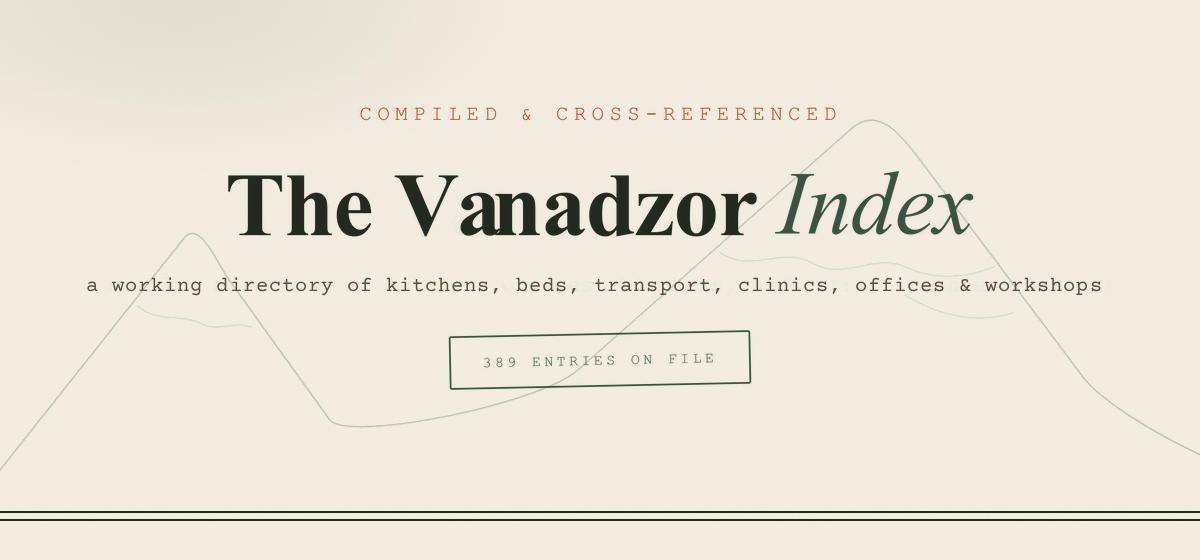
<style>
.page{position:relative;width:1200px;height:560px;background:#f2ede0}
.page>*{position:absolute;margin:0}
.t1{font:20.5px "CourierNewPSMT";letter-spacing:0.272em;color:#a94822}
.t2{font:20.5px "CourierNewPSMT";letter-spacing:0.272em;color:#a8451f}
.t3{font:90.2px "TimesNewRomanPS-BoldMT";letter-spacing:-0.011em;color:#23291f}
.t4{font:89.9px "TimesNewRomanPS-ItalicMT";letter-spacing:-0.008em;color:#3c5240}
.t5{font:20.5px "CourierNewPSMT";letter-spacing:0.036em;color:#57513f}
.t6{font:14.8px "CourierNewPSMT";letter-spacing:0.238em;color:#435846}
.t7{font:14.8px "CourierNewPSMT";letter-spacing:0.238em;color:#3c5240}
</style>
<div class="page">
<p class="t1" style="left:358px;top:105px;width:480px;height:18px">COMPILED &amp; CROSS-REFERENCED</p>
<p class="t2" style="left:358px;top:105px;width:480px;height:18px">COMPILED &amp; CROSS-REFERENCED</p>
<p class="t3" style="left:226px;top:173px;width:533px;height:66px">The Vanadzor</p>
<p class="t3" style="left:226px;top:173px;width:533px;height:66px">The Vanadzor</p>
<p class="t4" style="left:772px;top:168px;width:204px;height:69px">Index</p>
<p class="t4" style="left:772px;top:168px;width:204px;height:69px">Index</p>
<p class="t5" style="left:87px;top:277px;width:1014px;height:19px">a working directory of kitchens, beds, transport, clinics, offices &amp; workshops</p>
<p class="t5" style="left:87px;top:277px;width:1014px;height:19px">a working directory of kitchens, beds, transport, clinics, offices &amp; workshops</p>
<p class="t6" style="left:482px;top:351px;width:233px;height:19px;rotate:-1deg">389 ENTRIES ON FILE</p>
<p class="t7" style="left:482px;top:351px;width:233px;height:19px;rotate:-1deg">389 ENTRIES ON FILE</p>
</div>
